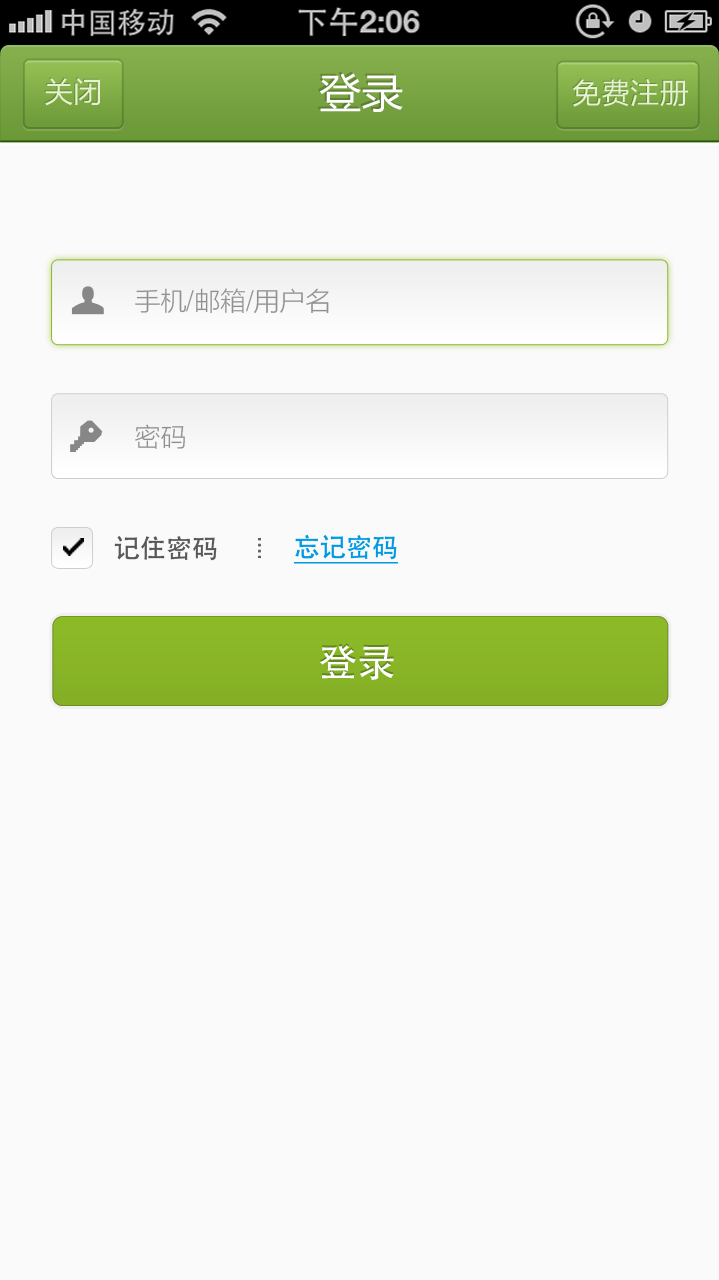
<style>
.page{position:relative;width:719px;height:1280px;background:#fafafa}
.page>*{position:absolute;margin:0}
.t1{font:29.2px "FZLTHJW--GB1-0";color:#dddddd}
.t2{font:42.7px "FZLTHJW--GB1-0";color:#ffffff}
.t3{font:26px "FZLTXHJW--GB1-0";color:#909090}
.t4{font:26px "AdobeHeitiStd-Regular";color:#009ae2;text-decoration:underline}
.t5{font:26px "AdobeHeitiStd-Regular";color:#585858}
.t6{font:38.5px "AdobeHeitiStd-Regular";color:#ffffff}
</style>
<div class="page">
<p class="t1" style="left:45px;top:78px;width:55px;height:28px">关闭</p>
<p class="t2" style="left:320px;top:73px;width:83px;height:39px">登录</p>
<p class="t1" style="left:573px;top:79px;width:115px;height:28px">免费注册</p>
<p class="t3" style="left:135px;top:288px;width:194px;height:26px">手机/邮箱/用户名</p>
<p class="t3" style="left:135px;top:424px;width:50px;height:25px">密码</p>
<p class="t4" style="left:294px;top:534px;width:104px;height:30px">忘记密码</p>
<p class="t5" style="left:114px;top:536px;width:103px;height:25px">记住密码</p>
<p class="t6" style="left:319px;top:645px;width:75px;height:35px">登录</p>
</div>
